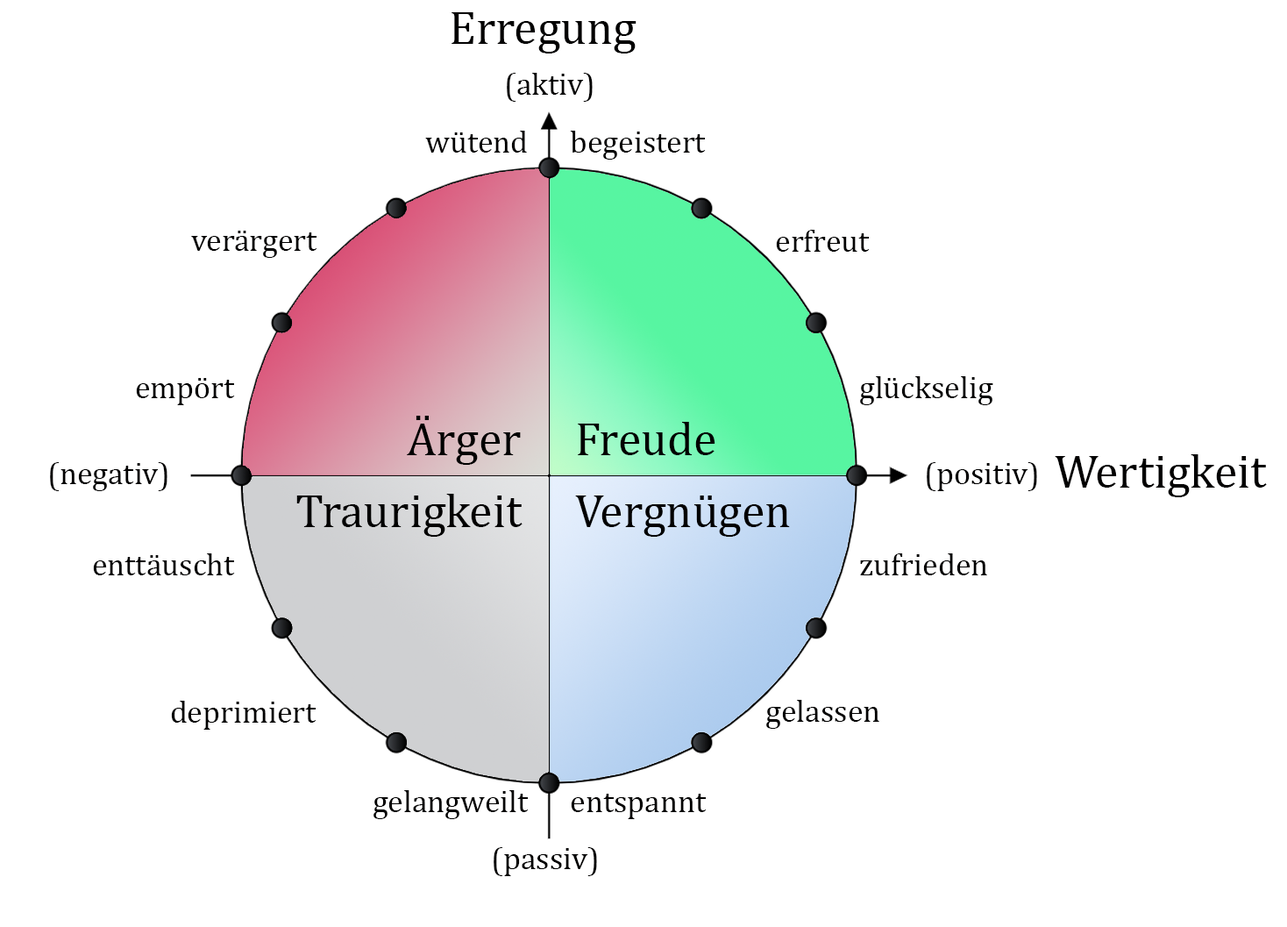
<style>
.page{position:relative;width:1287px;height:927px;background:#ffffff}
.page>*{position:absolute;margin:0}
.t1{font:47.3px "Cambria";color:#010000}
.t2{font:31.6px "Cambria";color:#010000}
</style>
<div class="page">
<p class="t1" style="left:451px;top:12px;width:185px;height:41px">Erregung</p>
<p class="t2" style="left:507px;top:73px;width:86px;height:29px">(aktiv)</p>
<p class="t2" style="left:425px;top:131px;width:102px;height:22px">wütend</p>
<p class="t2" style="left:570px;top:131px;width:136px;height:29px">begeistert</p>
<p class="t2" style="left:191px;top:231px;width:126px;height:27px">verärgert</p>
<p class="t2" style="left:776px;top:230px;width:94px;height:22px">erfreut</p>
<p class="t2" style="left:136px;top:378px;width:99px;height:27px">empört</p>
<p class="t2" style="left:860px;top:376px;width:133px;height:29px">glückselig</p>
<p class="t1" style="left:407px;top:416px;width:114px;height:49px">Ärger</p>
<p class="t1" style="left:578px;top:422px;width:137px;height:33px">Freude</p>
<p class="t2" style="left:50px;top:462px;width:117px;height:29px">(negativ)</p>
<p class="t2" style="left:927px;top:462px;width:110px;height:29px">(positiv)</p>
<p class="t1" style="left:1055px;top:454px;width:212px;height:43px">Wertigkeit</p>
<p class="t1" style="left:296px;top:494px;width:226px;height:42px">Traurigkeit</p>
<p class="t1" style="left:575px;top:495px;width:215px;height:41px">Vergnügen</p>
<p class="t2" style="left:93px;top:553px;width:142px;height:22px">enttäuscht</p>
<p class="t2" style="left:860px;top:553px;width:127px;height:22px">zufrieden</p>
<p class="t2" style="left:171px;top:700px;width:145px;height:29px">deprimiert</p>
<p class="t2" style="left:766px;top:700px;width:113px;height:28px">gelassen</p>
<p class="t2" style="left:373px;top:790px;width:156px;height:29px">gelangweilt</p>
<p class="t2" style="left:571px;top:793px;width:136px;height:26px">entspannt</p>
<p class="t2" style="left:494px;top:847px;width:103px;height:29px">(passiv)</p>
</div>
